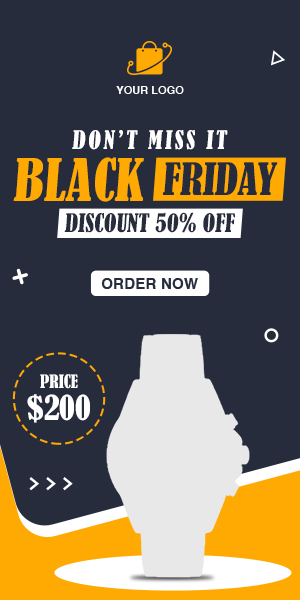
<style>
.page{position:relative;width:300px;height:600px;background:#262c3c}
.page>*{position:absolute;margin:0}
.t1{font:11.1px "Helvetica-Bold";color:#ffffff}
.t2{font:23.8px "BernardMT-Condensed";letter-spacing:0.11em;color:#ffffff}
.t3{font:54.7px "BernardMT-Condensed";color:#ffa903}
.t4{font:41.6px "BernardMT-Condensed";color:#262c3c}
.t5{font:23.8px "BernardMT-Condensed";color:#262c3c}
.t6{font:15.2px "Helvetica-Bold";color:#262c3c}
.t7{font:17.3px "BernardMT-Condensed";color:#ffffff}
.t8{font:32.2px "BernardMT-Condensed";color:#ffffff}
</style>
<div class="page">
<p class="t1" style="left:116px;top:86px;width:68px;height:8px">YOUR LOGO</p>
<p class="t2" style="left:72px;top:130px;width:156px;height:20px">DON’T MISS IT</p>
<p class="t3" style="left:13px;top:157px;width:131px;height:45px">BLACK</p>
<p class="t4" style="left:162px;top:162px;width:116px;height:33px">FRIDAY</p>
<p class="t5" style="left:64px;top:212px;width:172px;height:21px">DISCOUNT 50% OFF</p>
<p class="t6" style="left:101px;top:278px;width:97px;height:11px">ORDER NOW</p>
<p class="t7" style="left:40px;top:374px;width:38px;height:15px">PRICE</p>
<p class="t8" style="left:27px;top:394px;width:63px;height:29px">$200</p>
</div>
